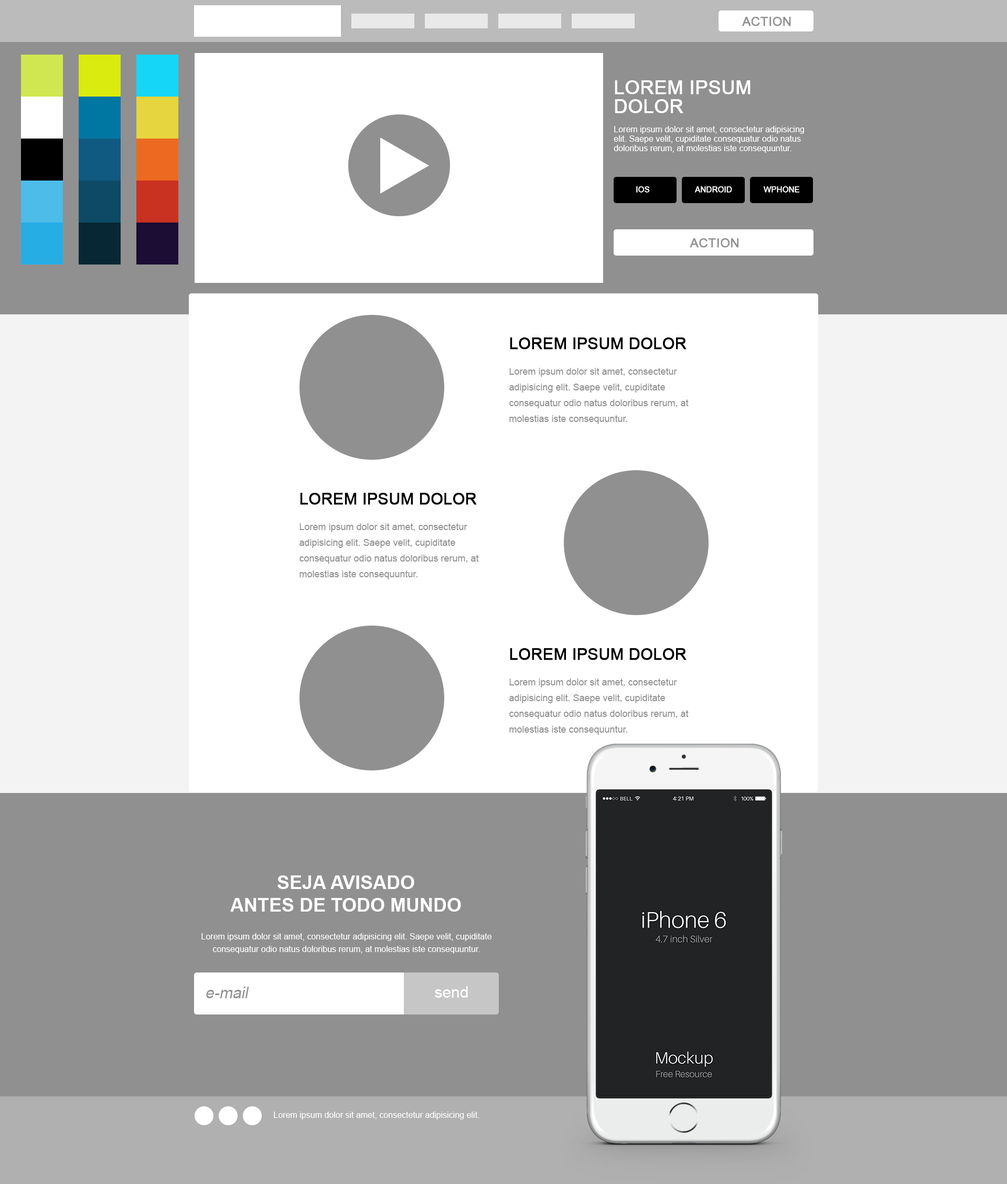
<style>
.page{position:relative;width:1007px;height:1184px;background:#909090}
.page>*{position:absolute;margin:0}
.t1{font:12.6px "ArialMT";color:#909090;text-transform:uppercase;font-weight:bold}
.t2{font:8.4px/9.4px "ArialMT";color:#ffffff}
.t3{font:18.9px/18.9px "ArialMT";color:#ffffff;text-transform:uppercase;font-weight:bold}
.t4{font:7.7px "ArialMT";color:#ffffff;text-transform:uppercase;font-weight:bold}
.t5{font:9.4px/15.7px "ArialMT";color:#909090}
.t6{font:15.7px/18.9px "ArialMT";color:#000000;text-transform:uppercase;font-weight:bold}
.t7{font:18.9px "Arial-BoldMT";color:#ffffff;text-transform:uppercase}
.t8{font:8.4px/12.6px "ArialMT";color:#ffffff}
.t9{font:15.7px "ArialMT";color:#909090;font-style:italic}
.t10{font:15.7px "ArialMT";color:#ffffff}
.t11{font:8.4px "ArialMT";color:#ffffff}
</style>
<div class="page">
<p class="t1" style="left:742px;top:17px;width:49px;height:9px">action</p>
<p class="t2" style="left:614px;top:80px;width:190px;height:73px"><span class="t3">Lorem ipsum dolor<br><br></span>Lorem ipsum dolor sit amet, consectetur adipisicing elit. Saepe velit, cupiditate consequatur odio natus doloribus rerum, at molestias iste consequuntur.</p>
<p class="t4" style="left:636px;top:186px;width:14px;height:7px">ios</p>
<p class="t4" style="left:695px;top:186px;width:37px;height:7px">android</p>
<p class="t4" style="left:764px;top:186px;width:36px;height:7px">wphone</p>
<p class="t1" style="left:690px;top:238px;width:49px;height:10px">action</p>
<p class="t5" style="left:509px;top:337px;width:180px;height:87px"><span class="t6">Lorem ipsum dolor<br><br></span>Lorem ipsum dolor sit amet, consectetur adipisicing elit. Saepe velit, cupiditate consequatur odio natus doloribus rerum, at molestias iste consequuntur.</p>
<p class="t5" style="left:300px;top:493px;width:179px;height:86px"><span class="t6">Lorem ipsum dolor<br><br></span>Lorem ipsum dolor sit amet, consectetur adipisicing elit. Saepe velit, cupiditate consequatur odio natus doloribus rerum, at molestias iste consequuntur.</p>
<p class="t5" style="left:509px;top:648px;width:180px;height:87px"><span class="t6">Lorem ipsum dolor<br><br></span>Lorem ipsum dolor sit amet, consectetur adipisicing elit. Saepe velit, cupiditate consequatur odio natus doloribus rerum, at molestias iste consequuntur.</p>
<p class="t7" style="left:230px;top:875px;width:231px;height:36px;text-align:center">seja avisado <br>antes de todo mundo</p>
<p class="t8" style="left:201px;top:933px;width:291px;height:20px;text-align:center">Lorem ipsum dolor sit amet, consectetur adipisicing elit. Saepe velit, cupiditate consequatur odio natus doloribus rerum, at molestias iste consequuntur.</p>
<p class="t9" style="left:206px;top:986px;width:43px;height:12px">e-mail</p>
<p class="t10" style="left:435px;top:986px;width:33px;height:11px">send</p>
<p class="t11" style="left:274px;top:1111px;width:206px;height:8px">Lorem ipsum dolor sit amet, consectetur adipisicing elit.</p>
</div>
